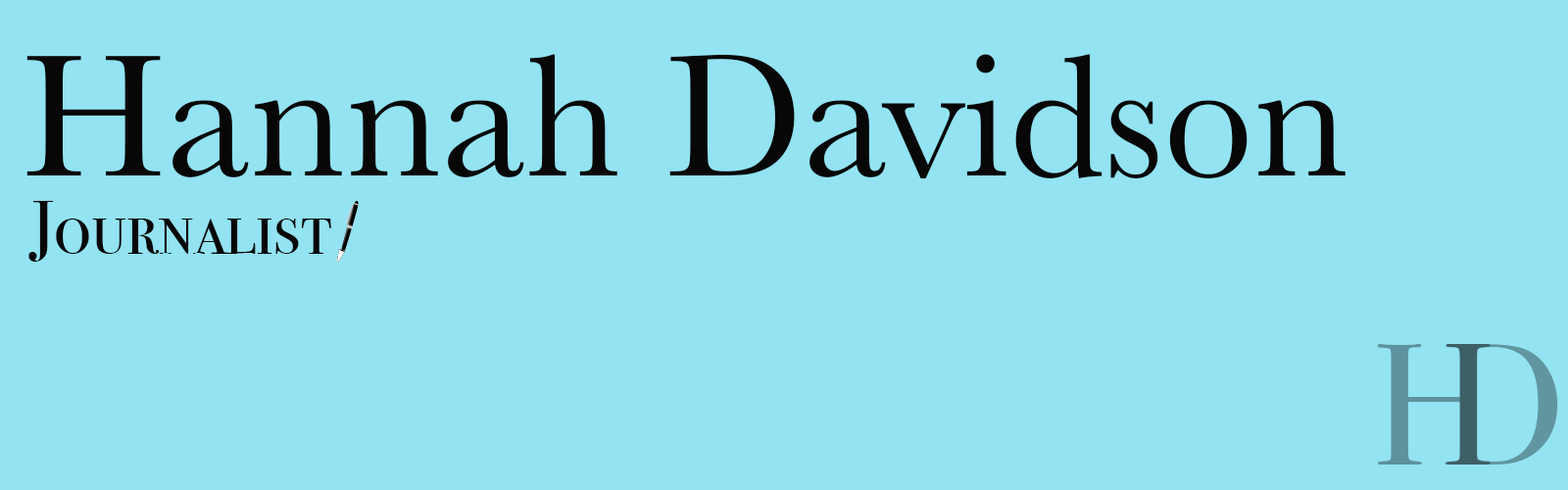
<style>
.page{position:relative;width:1568px;height:490px;background:#93e3f2}
.page>*{position:absolute;margin:0}
.t1{font:179.9px "Baskerville";color:#070707}
.t2{font:73.5px "BodoniSvtyTwoSCITCTT-Book";color:#070707}
.t3{font:171.5px "BodoniSvtyTwoSCITCTT-Book"}
.t4{font:171.8px "BodoniSvtyTwoSCITCTT-Book"}
</style>
<div class="page">
<p class="t1" style="left:26px;top:54px;width:1320px;height:124px">Hannah Davidson</p>
<p class="t2" style="left:28px;top:201px;width:303px;height:61px">Journalist</p>
<p class="t3" style="left:1377px;top:344px;width:114px;height:121px">H</p>
<p class="t4" style="left:1445px;top:344px;width:113px;height:121px">D</p>
</div>
